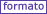
<style>
.page{position:relative;width:47px;height:14px;background:#ffffff}
.page>*{position:absolute;margin:0}
.t1{font:10px "Verdana";color:#553da1;font-weight:bold}
</style>
<div class="page">
<p class="t1" style="left:3px;top:1px;width:41px;height:9px">formato</p>
</div>
